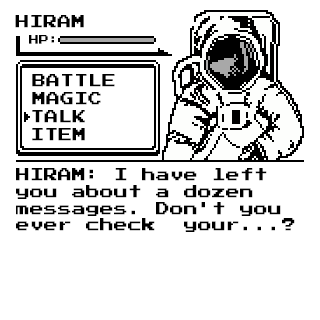
<style>
.page{position:relative;width:320px;height:320px;background:#ffffff}
.page>*{position:absolute;margin:0}
.t1{font:14px "PressStart2P";color:#000000}
.t2{font:10px "PressStart2P";color:#000000}
</style>
<div class="page">
<p class="t1" style="left:15px;top:15px;width:69px;height:13px">HIRAM</p>
<p class="t2" style="left:29px;top:35px;width:25px;height:9px">HP:</p>
<p class="t1" style="left:32px;top:74px;width:83px;height:13px">BATTLE</p>
<p class="t1" style="left:32px;top:92px;width:69px;height:13px">MAGIC</p>
<p class="t1" style="left:32px;top:110px;width:53px;height:13px">TALK</p>
<p class="t1" style="left:32px;top:128px;width:53px;height:13px">ITEM</p>
<p class="t1" style="left:16px;top:168px;width:279px;height:64px">HIRAM: I have left you about a dozen messages. Don't you ever check  your...?</p>
</div>
